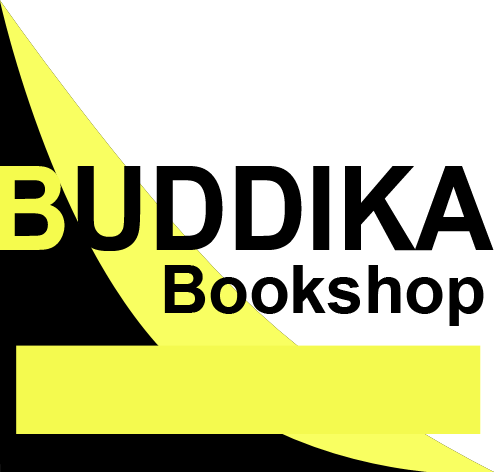
<style>
.page{position:relative;width:496px;height:472px;background:#ffffff}
.page>*{position:absolute;margin:0}
.t1{font:117px "Arial-BoldMT";color:#000000;scale:0.93 1}
.t2{font:117px "Arial-BoldMT";color:#f5fb4d;scale:0.93 1}
.t3{font:66.7px "Arial-BoldMT";color:#000000}
</style>
<div class="page">
<p class="t1" style="left:0px;top:166px;width:494px;height:85px"><span class="t2">B</span>UDDIKA</p>
<p class="t3" style="left:164px;top:265px;width:320px;height:61px">Bookshop</p>
</div>
